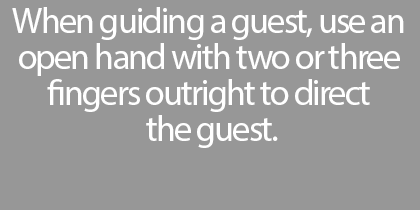
<style>
.page{position:relative;width:420px;height:210px;background:#979797}
.page>*{position:absolute;margin:0}
.t1{font:36px/36px "MyriadPro-Regular";letter-spacing:-0.05em;color:#ffffff}
</style>
<div class="page">
<p class="t1" style="left:12px;top:7px;width:392px;height:141px;text-align:center">When guiding a guest, use an <br>open hand with two or three <br>fingers outright to direct <br>the guest.</p>
</div>
